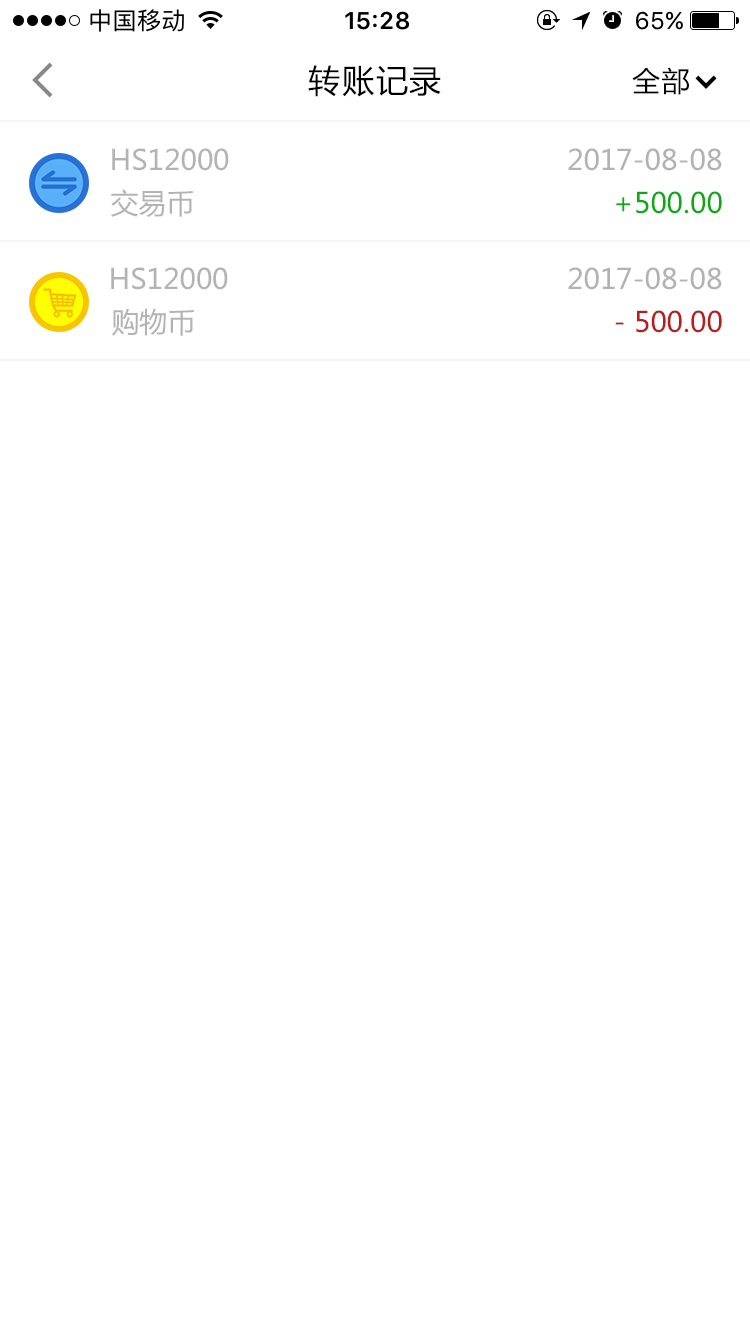
<style>
.page{position:relative;width:750px;height:1334px;background:#ffffff}
.page>*{position:absolute;margin:0}
.t1{font:32px "MicrosoftYaHei";letter-spacing:0.05em;color:#000000}
.t2{font:28px "MicrosoftYaHei";letter-spacing:0.05em;color:#000000}
.t3{font:28px "MicrosoftYaHei";color:#b3b3b3}
.t4{font:28px "MicrosoftYaHei";color:#b1b1b1}
.t5{font:28px "MicrosoftYaHei";color:#0da914}
.t6{font:28px "MicrosoftYaHei";color:#b71d1d}
</style>
<div class="page">
<p class="t1" style="left:308px;top:65px;width:133px;height:32px">转账记录</p>
<p class="t2" style="left:632px;top:67px;width:57px;height:28px">全部</p>
<p class="t3" style="left:112px;top:148px;width:117px;height:23px">HS12000</p>
<p class="t4" style="left:568px;top:148px;width:154px;height:23px">2017-08-08</p>
<p class="t3" style="left:111px;top:189px;width:82px;height:28px">交易币</p>
<p class="t5" style="left:616px;top:191px;width:106px;height:23px">+500.00</p>
<p class="t3" style="left:111px;top:267px;width:117px;height:23px">HS12000</p>
<p class="t4" style="left:568px;top:267px;width:154px;height:23px">2017-08-08</p>
<p class="t3" style="left:112px;top:308px;width:82px;height:28px">购物币</p>
<p class="t6" style="left:615px;top:310px;width:107px;height:23px">- 500.00</p>
</div>
